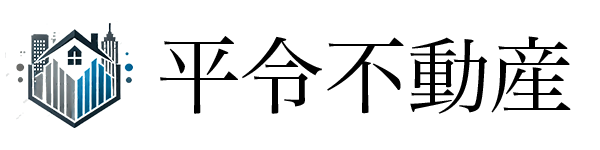
<style>
.page{position:relative;width:600px;height:150px;background:#ffffff}
.page>*{position:absolute;margin:0}
.t1{font:83.3px "HiraMinPro-W3";color:#000000}
</style>
<div class="page">
<p class="t1" style="left:160px;top:36px;width:411px;height:78px">平令不動産</p>
</div>
